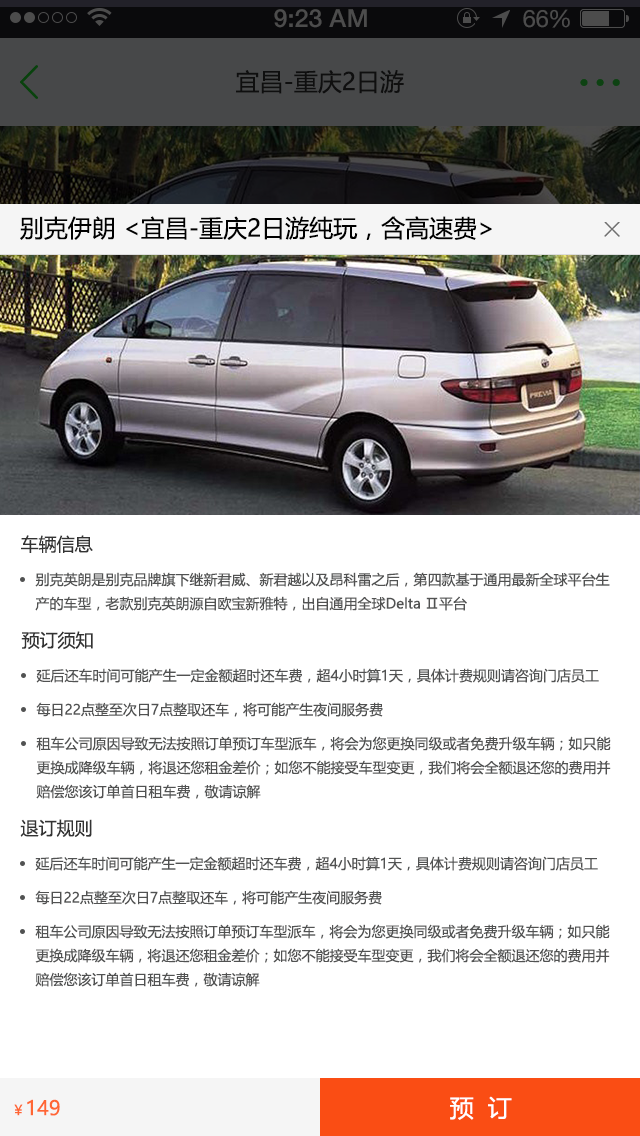
<style>
.page{position:relative;width:640px;height:1136px;background:#ffffff}
.page>*{position:absolute;margin:0}
.t1{font:24px "MicrosoftYaHei";color:#000000}
.t2{font:18px "MicrosoftYaHei";color:#333333}
.t3{font:14px/24px "MicrosoftYaHei";color:#515252}
.t4{font:14px "MicrosoftYaHei";color:#515252}
.t5{font:24px "MicrosoftYaHei";color:#ffffff}
.t6{font:20px "MicrosoftYaHei";color:#ff6633}
.t7{font:14px "MicrosoftYaHei";color:#ff6633}
</style>
<div class="page">
<p class="t1" style="left:20px;top:216px;width:472px;height:24px">别克伊朗 &lt;宜昌-重庆2日游纯玩，含高速费&gt;</p>
<p class="t2" style="left:21px;top:535px;width:72px;height:18px">车辆信息</p>
<p class="t3" style="left:35px;top:572px;width:575px;height:39px">别克英朗是别克品牌旗下继新君威、新君越以及昂科雷之后，第四款基于通用最新全球平台生<br>产的车型，老款别克英朗源自欧宝新雅特，出自通用全球Delta Ⅱ平台</p>
<p class="t2" style="left:21px;top:631px;width:72px;height:19px">预订须知</p>
<p class="t4" style="left:36px;top:668px;width:563px;height:15px">延后还车时间可能产生一定金额超时还车费，超4小时算1天，具体计费规则请咨询门店员工</p>
<p class="t4" style="left:36px;top:702px;width:347px;height:15px">每日22点整至次日7点整取还车，将可能产生夜间服务费</p>
<p class="t3" style="left:36px;top:736px;width:575px;height:63px">租车公司原因导致无法按照订单预订车型派车，将会为您更换同级或者免费升级车辆；如只能<br>更换成降级车辆，将退还您租金差价；如您不能接受车型变更，我们将会全额退还您的费用并<br>赔偿您该订单首日租车费，敬请谅解</p>
<p class="t2" style="left:20px;top:819px;width:72px;height:18px">退订规则</p>
<p class="t4" style="left:35px;top:856px;width:563px;height:15px">延后还车时间可能产生一定金额超时还车费，超4小时算1天，具体计费规则请咨询门店员工</p>
<p class="t4" style="left:35px;top:890px;width:347px;height:15px">每日22点整至次日7点整取还车，将可能产生夜间服务费</p>
<p class="t3" style="left:35px;top:924px;width:575px;height:63px">租车公司原因导致无法按照订单预订车型派车，将会为您更换同级或者免费升级车辆；如只能<br>更换成降级车辆，将退还您租金差价；如您不能接受车型变更，我们将会全额退还您的费用并<br>赔偿您该订单首日租车费，敬请谅解</p>
<p class="t5" style="left:450px;top:1096px;width:62px;height:24px">预  订</p>
<p class="t6" style="left:14px;top:1099px;width:46px;height:17px"><span class="t7">￥</span>149</p>
</div>
